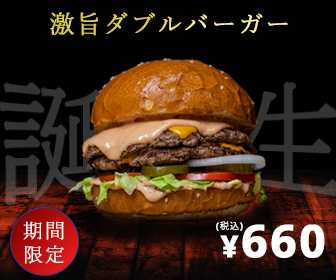
<style>
.page{position:relative;width:336px;height:280px;background:#000000}
.page>*{position:absolute;margin:0}
.t1{font:25px "YuMincho-Light";letter-spacing:0.05em;color:#e0d048;font-weight:bold}
.t2{font:20px "YuMincho-Light";letter-spacing:0.05em;color:#ffffff;font-weight:bold}
.t3{font:9px "KozGoPr6N-Regular";letter-spacing:0.05em;color:#ffffff;font-weight:bold}
.t4{font:9px "NotoSans-Bold";letter-spacing:0.05em;color:#ffffff;font-weight:bold}
.t5{font:45px "NotoSans-Bold";letter-spacing:0.05em;color:#ffffff;font-weight:bold}
.t6{font:30px "NotoSans-Bold";letter-spacing:0.05em;color:#ffffff;font-weight:bold}
</style>
<div class="page">
<p class="t1" style="left:50px;top:12px;width:238px;height:24px">激旨ダブルバーガー</p>
<p class="t2" style="left:23px;top:221px;width:41px;height:43px;text-align:center">期間<br>限定</p>
<p class="t3" style="left:216px;top:221px;width:27px;height:10px"><span class="t4">(</span>税込<span class="t4">)</span></p>
<p class="t5" style="left:242px;top:224px;width:83px;height:34px">660</p>
<p class="t6" style="left:220px;top:235px;width:19px;height:23px">¥</p>
</div>
